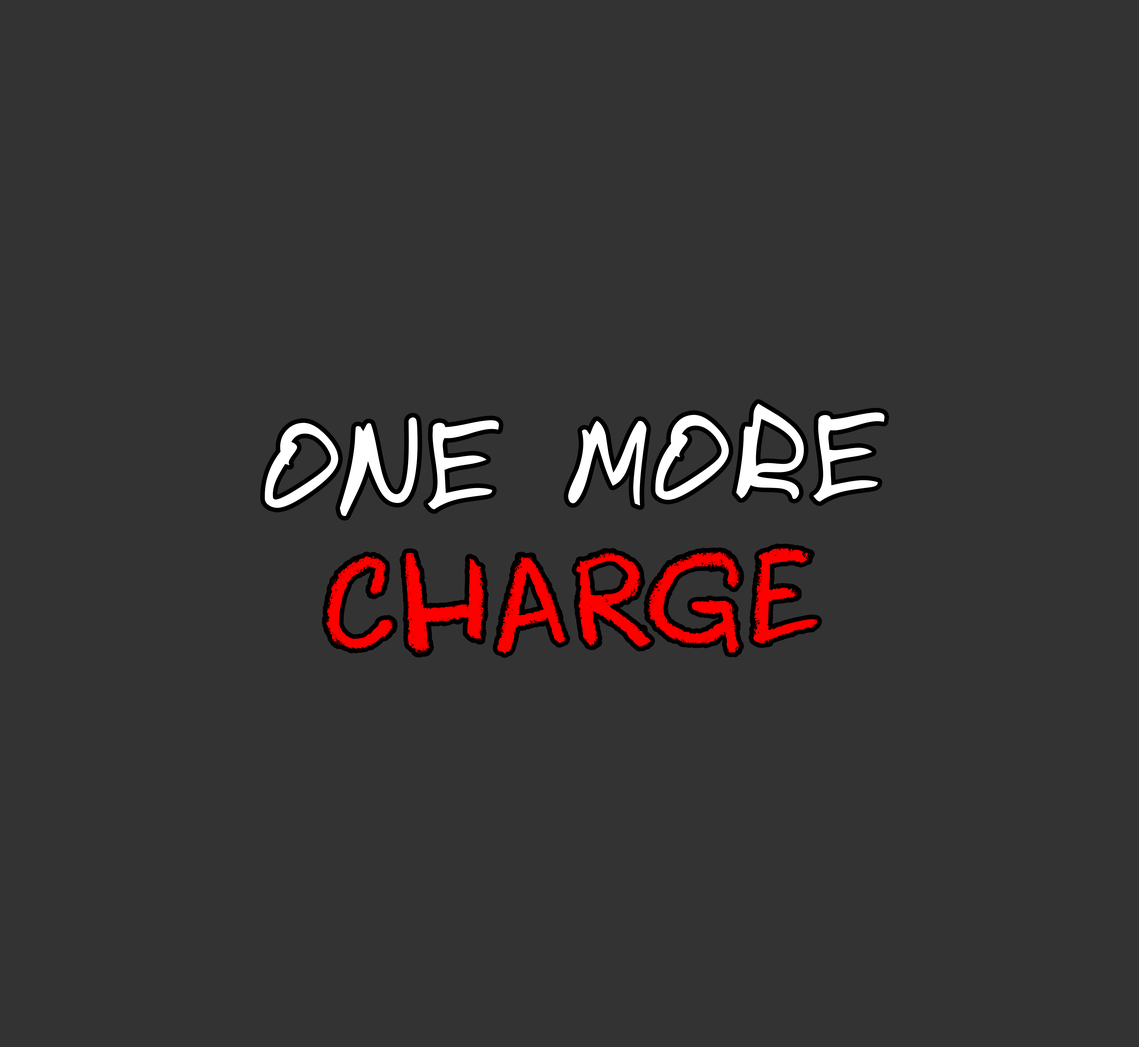
<style>
.page{position:relative;width:1139px;height:1047px;background:#333333}
.page>*{position:absolute;margin:0}
.t1{font:121px "DomesticManners";letter-spacing:0.04em;color:#ffffff}
.t2{font:121px "DKCoolCrayon";letter-spacing:0.04em;color:#ff0000}
</style>
<div class="page">
<p class="t1" style="left:265px;top:404px;width:619px;height:250px;text-align:center;rotate:-1deg">ONE MORE<br><span class="t2">CHARGE</span></p>
</div>
